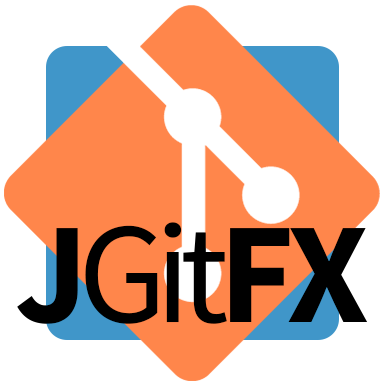
<style>
.page{position:relative;width:386px;height:386px;background:#ffffff}
.page>*{position:absolute;margin:0}
.t1{font:144px "SourceSansPro-Regular";letter-spacing:-0.05em;color:#000000}
.t2{font:144px "SourceSansPro-Bold";letter-spacing:-0.05em;color:#000000}
</style>
<div class="page">
<p class="t1" style="left:17px;top:222px;width:351px;height:102px"><span class="t2">J</span>Git<span class="t2">FX</span></p>
</div>
